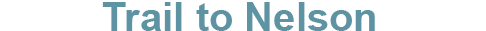
<style>
.page{position:relative;width:486px;height:31px;background:#ffffff}
.page>*{position:absolute;margin:0}
.t1{font:40px "Arial-BoldMT";color:#5d93a2}
</style>
<div class="page">
<p class="t1" style="left:102px;top:2px;width:273px;height:29px">Trail to Nelson</p>
</div>
